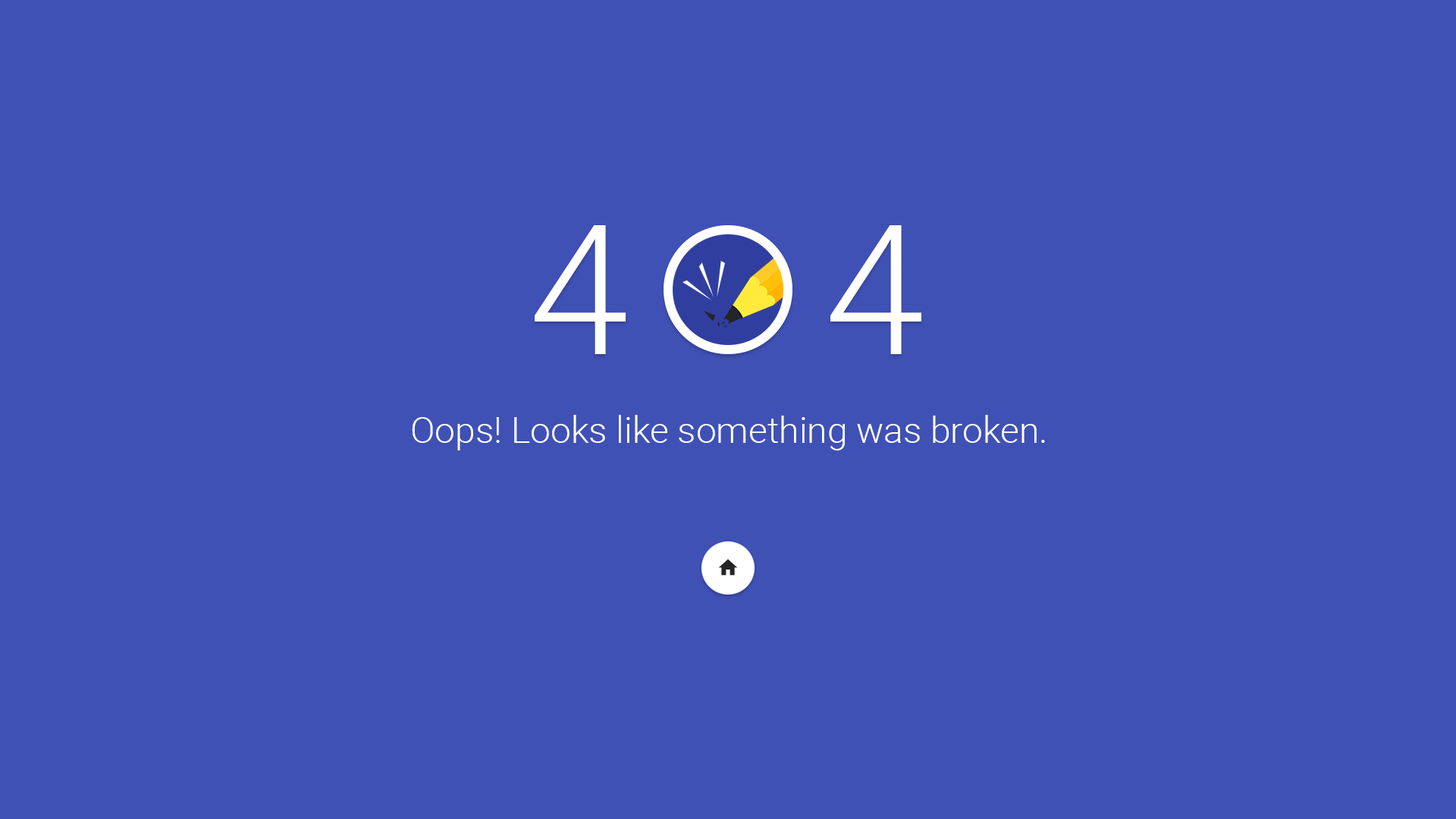
<style>
.page{position:relative;width:1456px;height:819px;background:#3f51b5}
.page>*{position:absolute;margin:0}
.t1{font:36.4px "Roboto-Light";color:#ffffff}
</style>
<div class="page">
<p class="t1" style="left:412px;top:415px;width:633px;height:35px">Oops! Looks like something was broken.</p>
</div>
